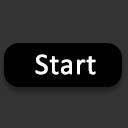
<style>
.page{position:relative;width:128px;height:128px;background:#333333}
.page>*{position:absolute;margin:0}
.t1{font:30px "Calibri";color:#ffffff;font-weight:bold}
</style>
<div class="page">
<p class="t1" style="left:35px;top:54px;width:61px;height:21px">Start</p>
</div>
